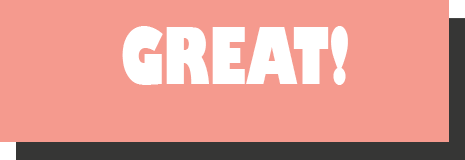
<style>
.page{position:relative;width:465px;height:160px;background:#f59a8e}
.page>*{position:absolute;margin:0}
.t1{font:75.6px "GillSans-UltraBoldCondensed";color:#ffffff}
</style>
<div class="page">
<p class="t1" style="left:122px;top:26px;width:226px;height:59px">GREAT!</p>
</div>
